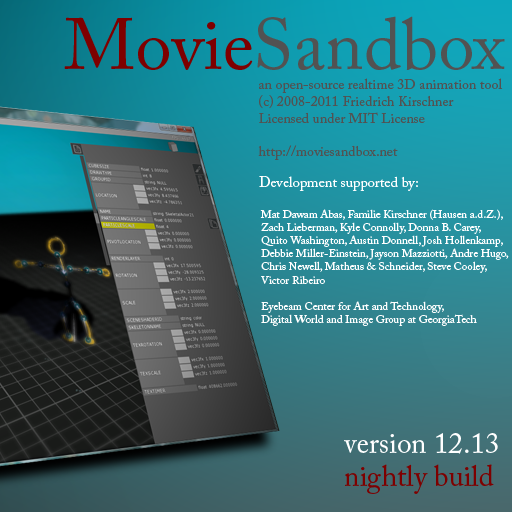
<style>
.page{position:relative;width:512px;height:512px}
.page>*{position:absolute;margin:0}
.t1{font:72.5px "ACaslonPro-Regular";color:#525252}
.t2{font:72.5px "ACaslonPro-Regular";color:#7e0000}
.t3{font:14px "ACaslonPro-Regular";color:#525252}
.t4{font:14.3px "ACaslonPro-Regular";color:#ffffff}
.t5{font:11px "ACaslonPro-Regular";color:#ffffff}
.t6{font:29.1px "ACaslonPro-Regular";color:#ffffff}
.t7{font:29.1px "ACaslonPro-Regular";color:#7e0000}
</style>
<div class="page">
<p class="t1" style="left:64px;top:16px;width:441px;height:54px"><span class="t2">Movie</span>Sandbox</p>
<p class="t3" style="left:258px;top:78px;width:245px;height:82px">an open-source realtime 3D animation tool<br>(c) 2008-2011 Friedrich Kirschner<br>Licensed under MIT License<br><br>http://moviesandbox.net</p>
<p class="t4" style="left:259px;top:176px;width:159px;height:15px">Development supported by:</p>
<p class="t5" style="left:260px;top:209px;width:249px;height:117px">Mat Dawam Abas, Familie Kirschner (Hausen a.d.Z.),<br>Zach Lieberman, Kyle Connolly, Donna B. Carey, <br>Quito Washington, Austin Donnell, Josh Hollenkamp,<br>Debbie Miller-Einstein, Jayson Mazziotti, Andre Hugo,<br>Chris Newell, Matheus &amp; Schneider, Steve Cooley,<br>Victor Ribeiro<br><br>Eyebeam Center for Art and Technology, <br>Digital World and Image Group at GeorgiaTech</p>
<p class="t6" style="left:344px;top:433px;width:154px;height:21px">version 12.13</p>
<p class="t7" style="left:345px;top:464px;width:149px;height:30px">nightly build</p>
</div>
